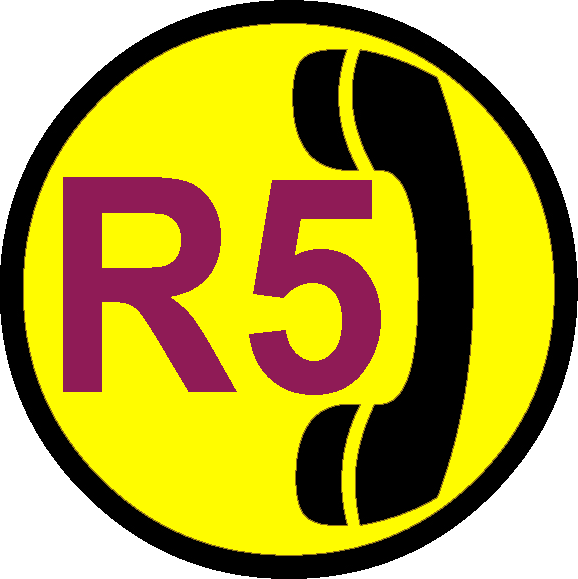
<style>
.page{position:relative;width:578px;height:579px;background:#fffc00}
.page>*{position:absolute;margin:0}
.t1{font:300px "ArialNarrow-Bold";color:#8f1b56;scale:1.1 1}
</style>
<div class="page">
<p class="t1" style="left:63px;top:177px;width:318px;height:218px">R5</p>
</div>
